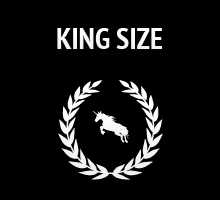
<style>
.page{position:relative;width:220px;height:200px;background:#000000}
.page>*{position:absolute;margin:0}
.t1{font:30px "PTSans-NarrowBold";color:#ffffff;text-transform:uppercase}
.t2{font:36px "MediaevalBats";color:#ffffff}
</style>
<div class="page">
<p class="t1" style="left:57px;top:28px;width:105px;height:21px">King Size</p>
<p class="t2" style="left:92px;top:111px;width:38px;height:32px">2</p>
</div>
